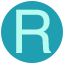
<style>
.page{position:relative;width:64px;height:64px;background:#209fb2}
.page>*{position:absolute;margin:0}
.t1{font:60px "Helvetica";color:#b6fbf0}
</style>
<div class="page">
<p class="t1" style="left:16px;top:9px;width:35px;height:44px">R</p>
</div>
